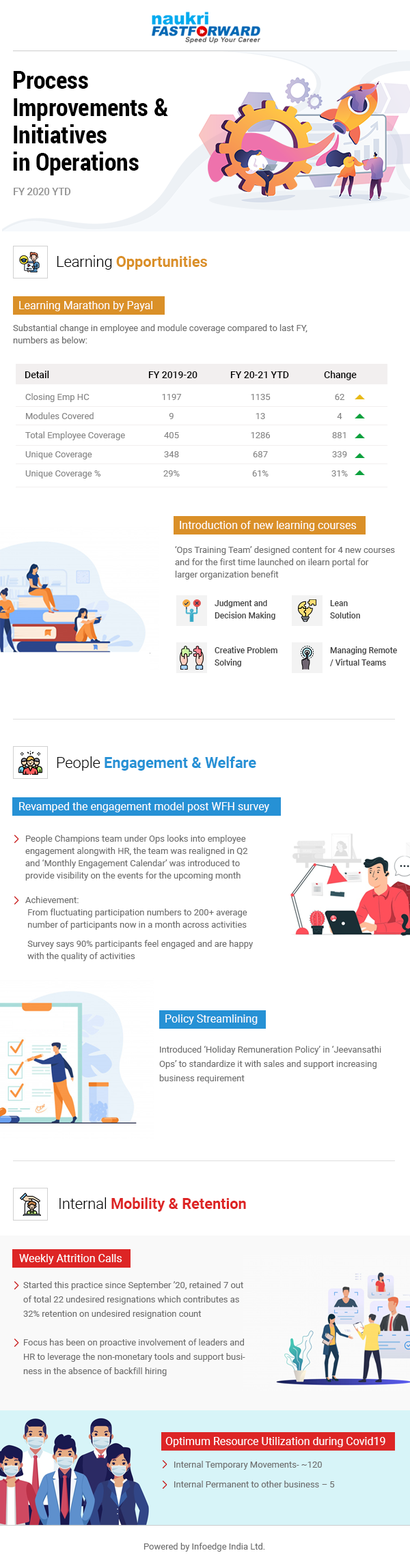
<style>
.page{position:relative;width:410px;height:1568px;background:#ffffff}
.page>*{position:absolute;margin:0}
.t1{font:24.3px/27.3px "RobotoCondensed-Bold";color:#000000}
.t2{font:9.9px "Roboto-Medium";color:#929292}
.t3{font:15.1px "Roboto-Bold";color:#da9028}
.t4{font:15.1px "Roboto-Light";color:#000000}
.t5{font:10.9px "Roboto-Regular";color:#ffffff}
.t6{font:8.9px/12.3px "Roboto-Regular";color:#6f6f6f}
.t7{font:9.6px "Roboto-Medium";color:#000000}
.t8{font:8.9px/19.1px "Roboto-Regular";color:#868686}
.t9{font:8.2px/12.3px "Roboto-Medium";color:#3d3d3d}
.t10{font:15.1px "Roboto-Bold";color:#2691d5}
.t11{font:8.9px/9.6px "Roboto-Regular";color:#6f6f6f}
.t12{font:8.9px/14.3px "Roboto-Regular";color:#6f6f6f}
.t13{font:15.1px "Roboto-Bold";color:#dd2525}
.t14{font:8.9px/19.8px "Roboto-Regular";color:#6f6f6f}
.t15{font:8.9px "Roboto-Regular";color:#6f6f6f}
</style>
<div class="page">
<p class="t1" style="left:13px;top:71px;width:155px;height:104px">Process<br>Improvements &amp;<br>Initiatives<br>in Operations</p>
<p class="t2" style="left:14px;top:188px;width:57px;height:7px">FY 2020 YTD</p>
<p class="t3" style="left:57px;top:255px;width:150px;height:15px"><span class="t4">Learning </span>Opportunities</p>
<p class="t5" style="left:19px;top:301px;width:133px;height:10px">Learning Marathon by Payal</p>
<p class="t6" style="left:13px;top:324px;width:294px;height:19px">Substantial change in employee and module coverage compared to last FY,<br>numbers as below:</p>
<p class="t7" style="left:25px;top:371px;width:24px;height:7px">Detail</p>
<p class="t7" style="left:148px;top:371px;width:49px;height:7px">FY 2019-20</p>
<p class="t7" style="left:230px;top:371px;width:59px;height:7px">FY 20-21 YTD</p>
<p class="t7" style="left:324px;top:371px;width:32px;height:9px">Change</p>
<p class="t8" style="left:25px;top:393px;width:100px;height:86px">Closing Emp HC<br>Modules Covered<br>Total Employee Coverage<br>Unique Coverage<br>Unique Coverage %</p>
<p class="t8" style="left:162px;top:394px;width:20px;height:82px;text-align:center">1197<br>9<br>405<br>348<br>29%</p>
<p class="t8" style="left:251px;top:394px;width:19px;height:82px;text-align:center">1135<br>13<br>1286<br>687<br>61%</p>
<p class="t8" style="left:331px;top:394px;width:16px;height:82px;text-align:center">62<br>4<br>881<br>339<br>31%</p>
<p class="t5" style="left:180px;top:521px;width:176px;height:10px">Introduction of new learning courses</p>
<p class="t6" style="left:175px;top:546px;width:220px;height:34px">‘Ops Training Team’ designed content for 4 new courses<br>and for the first time launched on ilearn portal for<br>larger organization benefit</p>
<p class="t9" style="left:214px;top:600px;width:61px;height:20px">Judgment and<br>Decision Making</p>
<p class="t9" style="left:330px;top:600px;width:30px;height:18px">Lean<br>Solution</p>
<p class="t9" style="left:214px;top:646px;width:63px;height:21px">Creative Problem<br>Solving</p>
<p class="t9" style="left:330px;top:646px;width:67px;height:20px">Managing Remote<br>/ Virtual Teams</p>
<p class="t10" style="left:57px;top:756px;width:199px;height:15px"><span class="t4">People </span>Engagement &amp; Welfare</p>
<p class="t5" style="left:19px;top:802px;width:250px;height:10px">Revamped the engagement model post WFH survey</p>
<p class="t6" style="left:25px;top:835px;width:228px;height:126px">People Champions team under Ops looks into employee<br>engagement alongwith HR, the team was realigned in Q2<br>and ‘Monthly Engagement Calendar’ was introduced to<br>provide visibility on the events for the upcoming month<br><br>Achievement:<br> From fluctuating participation numbers to 200+ average<br> <span class="t11">number of participants now in a month across activities<br><br> Survey says 90% participants feel engaged and are happy<br></span> with the quality of activities</p>
<p class="t5" style="left:165px;top:1014px;width:92px;height:11px">Policy Streamlining</p>
<p class="t12" style="left:159px;top:1046px;width:222px;height:37px">Introduced ‘Holiday Remuneration Policy’ in ‘Jeevansathi Ops’ to standardize it with sales and support increasing business requirement</p>
<p class="t13" style="left:59px;top:1197px;width:187px;height:15px"><span class="t4">Internal </span>Mobility &amp; Retention</p>
<p class="t5" style="left:19px;top:1254px;width:103px;height:10px">Weekly Attrition Calls</p>
<p class="t12" style="left:23px;top:1281px;width:222px;height:95px">Started this practice since September ’20, retained 7 out of total 22 undesired resignations which contributes as 32% retention on undesired resignation count<br><br>Focus has been on proactive involvement of leaders and HR to leverage the non-monetary tools and support business in the absence of backfill hiring</p>
<p class="t5" style="left:165px;top:1437px;width:220px;height:10px">Optimum Resource Utilization during Covid19</p>
<p class="t14" style="left:174px;top:1461px;width:160px;height:26px">Internal Temporary Movements- ~120<br>Internal Permanent to other business – 5</p>
<p class="t15" style="left:144px;top:1543px;width:121px;height:9px">Powered by Infoedge India Ltd.</p>
</div>
